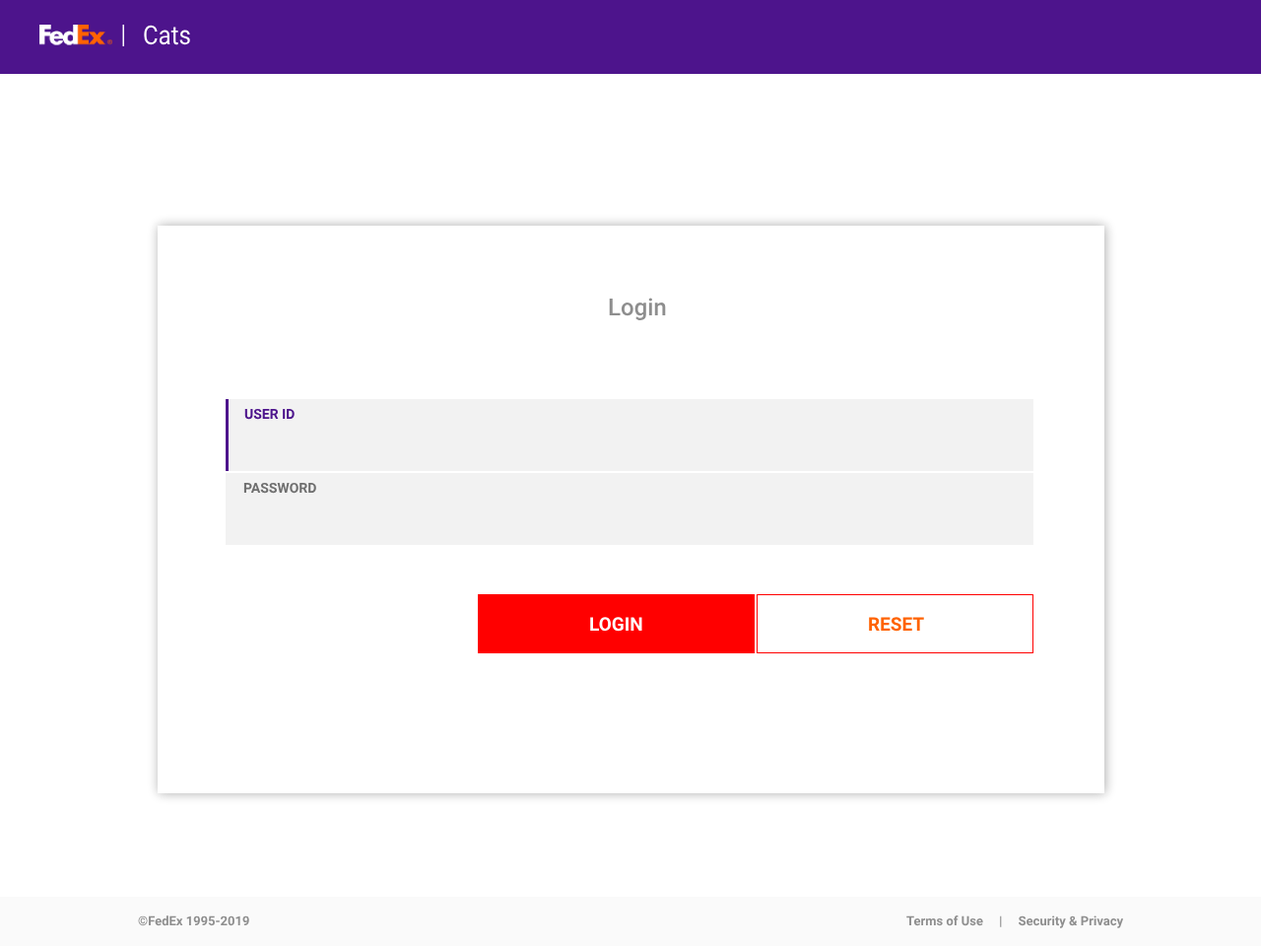
<style>
.page{position:relative;width:1261px;height:946px;background:#ffffff}
.page>*{position:absolute;margin:0}
.t1{font:26.1px "Roboto-Regular";color:#ffffff;scale:0.9 1}
.t2{font:23.6px "Roboto-Medium";color:#8e8e8e}
.t3{font:13.8px "Roboto-Bold";color:#4d148c}
.t4{font:13.8px "Roboto-Bold";color:#6f6f6f}
.t5{font:18.7px "Roboto-Bold";color:#ffffff}
.t6{font:18.7px "Roboto-Bold";color:#ff6200}
.t7{font:12.8px "Roboto-Bold";color:#8e8e8e}
</style>
<div class="page">
<p class="t1" style="left:144px;top:25px;width:46px;height:20px">Cats</p>
<p class="t2" style="left:609px;top:297px;width:57px;height:23px">Login</p>
<p class="t3" style="left:244px;top:409px;width:51px;height:11px">USER ID</p>
<p class="t4" style="left:243px;top:482px;width:73px;height:12px">PASSWORD</p>
<p class="t5" style="left:590px;top:617px;width:52px;height:14px">LOGIN</p>
<p class="t6" style="left:869px;top:617px;width:55px;height:14px">RESET</p>
<p class="t7" style="left:138px;top:915px;width:111px;height:11px">©FedEx 1995-2019</p>
<p class="t7" style="left:906px;top:915px;width:218px;height:13px">Terms of Use     |     Security &amp; Privacy</p>
</div>
